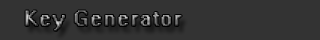
<style>
.page{position:relative;width:320px;height:40px;background:#333333}
.page>*{position:absolute;margin:0}
.t1{font:20px "System";letter-spacing:0.05em}
</style>
<div class="page">
<p class="t1" style="left:25px;top:10px;width:157px;height:21px">Key Generator</p>
</div>
